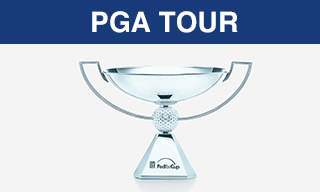
<style>
.page{position:relative;width:320px;height:192px;background:#f4f4f4}
.page>*{position:absolute;margin:0}
.t1{font:28px "Helvetica-Bold";letter-spacing:0.01em;color:#ffffff}
</style>
<div class="page">
<p class="t1" style="left:92px;top:11px;width:146px;height:22px">PGA TOUR</p>
</div>
